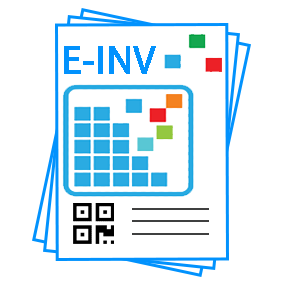
<style>
.page{position:relative;width:288px;height:288px;background:#ffffff}
.page>*{position:absolute;margin:0}
.t1{font:56px "MyriadArabic-Regular";color:#0292fd;font-weight:bold}
</style>
<div class="page">
<p class="t1" style="left:64px;top:46px;width:92px;height:28px">E-INV</p>
</div>
